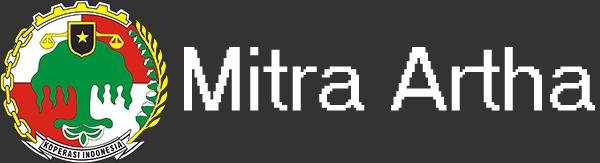
<style>
.page{position:relative;width:600px;height:163px;background:#333333}
.page>*{position:absolute;margin:0}
.t1{font:88.2px "MS Sans Serif";color:#ffffff;scale:0.96 1}
</style>
<div class="page">
<p class="t1" style="left:184px;top:47px;width:411px;height:64px">Mitra Artha</p>
</div>
